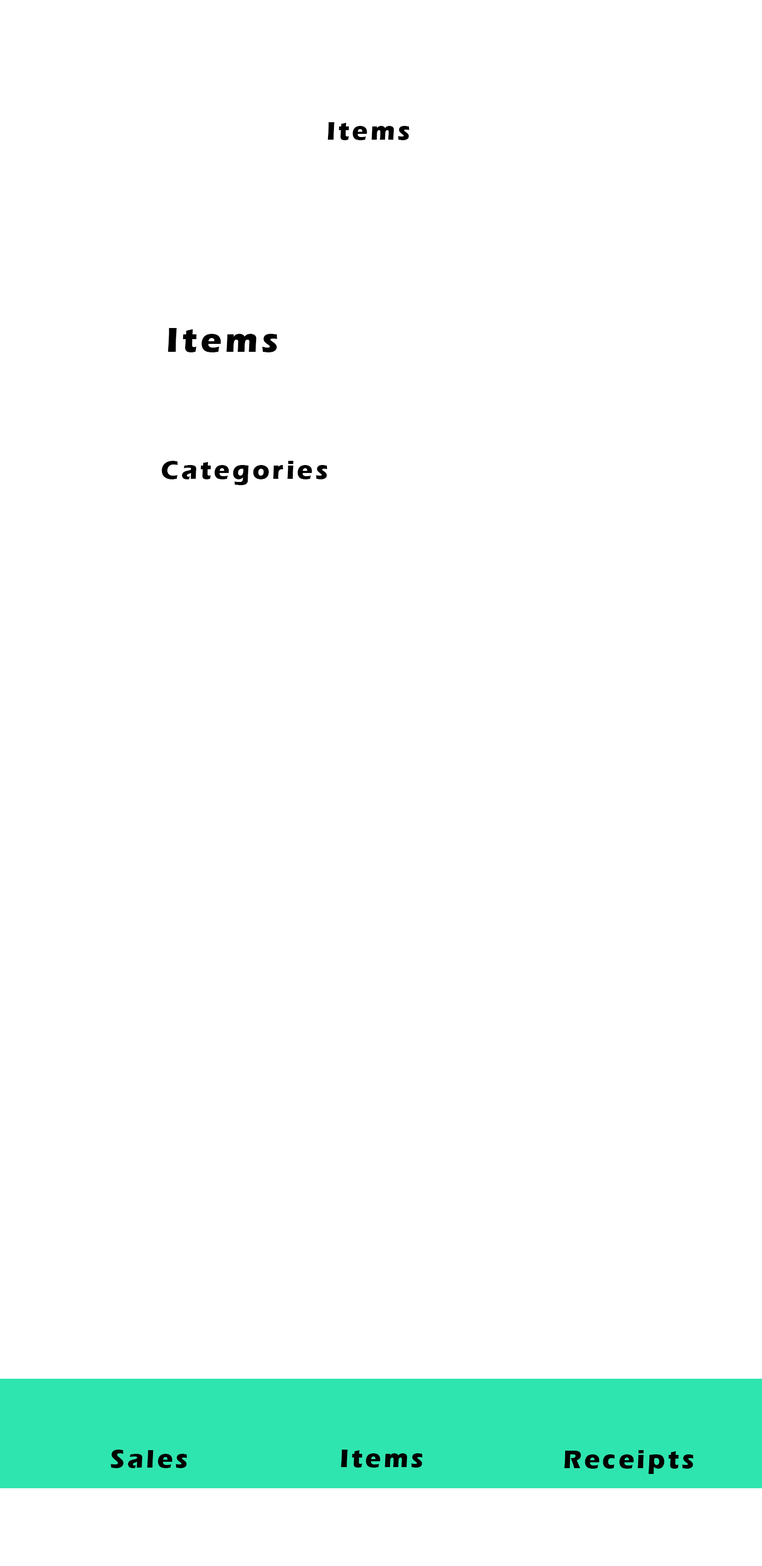
<style>
.page{position:relative;width:762px;height:1566px;background:#ffffff}
.page>*{position:absolute;margin:0}
.t1{font:26.4px "ErasITC-Bold";letter-spacing:0.1em;color:#000000}
.t2{font:35.3px "ErasITC-Bold";letter-spacing:0.1em;color:#000000}
</style>
<div class="page">
<p class="t1" style="left:327px;top:122px;width:82px;height:18px">Items</p>
<p class="t2" style="left:168px;top:328px;width:109px;height:24px">Items</p>
<p class="t1" style="left:161px;top:461px;width:166px;height:24px">Categories</p>
<p class="t1" style="left:111px;top:1449px;width:76px;height:19px">Sales</p>
<p class="t1" style="left:341px;top:1449px;width:82px;height:18px">Items</p>
<p class="t1" style="left:564px;top:1450px;width:129px;height:24px">Receipts</p>
</div>
